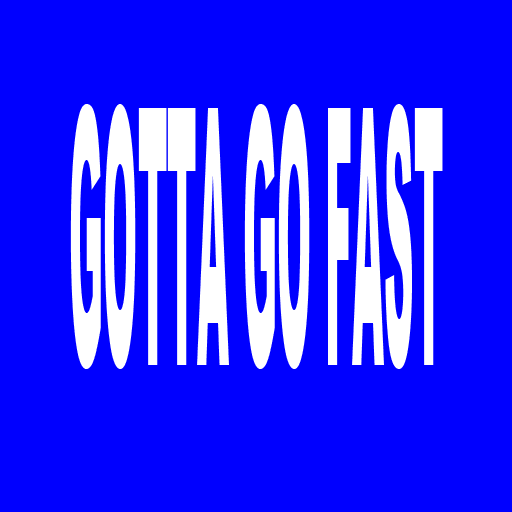
<style>
.page{position:relative;width:512px;height:512px;background:#0000ff}
.page>*{position:absolute;margin:0}
.t1{font:358.9px "Arial-Black";color:#ffffff;scale:0.11 1}
</style>
<div class="page">
<p class="t1" style="left:70px;top:104px;width:373px;height:265px">GOTTA GO FAST</p>
</div>
